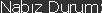
<style>
.page{position:relative;width:102px;height:13px;background:#333333}
.page>*{position:absolute;margin:0}
.t1{font:16px "Verdana";letter-spacing:-0.03em;color:#ffffff}
</style>
<div class="page">
<p class="t1" style="left:1px;top:0px;width:101px;height:13px">Nabız Durum:</p>
</div>
